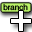
<style>
.page{position:relative;width:32px;height:32px;background:#ffffff}
.page>*{position:absolute;margin:0}
.t1{font:8px "Helvetica";color:#000000}
</style>
<div class="page">
<p class="t1" style="left:3px;top:4px;width:25px;height:7px">branch</p>
</div>
